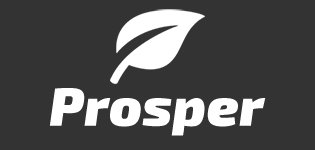
<style>
.page{position:relative;width:315px;height:150px;background:#333333}
.page>*{position:absolute;margin:0}
.t1{font:54px "Exo2.0-BlackItalic";letter-spacing:0.01em;color:#ffffff}
</style>
<div class="page">
<p class="t1" style="left:49px;top:88px;width:217px;height:48px">Prosper</p>
</div>
